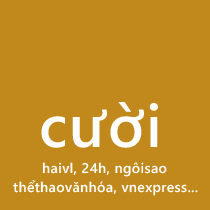
<style>
.page{position:relative;width:210px;height:210px;background:#c1891b}
.page>*{position:absolute;margin:0}
.t1{font:60px "SegoeWP-Semibold";letter-spacing:0.025em;color:#ffffff}
.t2{font:14px "SegoeWP-Semibold";letter-spacing:0.025em;color:#fefefe}
.t3{font:14px "SegoeWP-Semibold";letter-spacing:0.025em;color:#ffffff}
</style>
<div class="page">
<p class="t1" style="left:41px;top:102px;width:117px;height:46px">cười</p>
<p class="t2" style="left:42px;top:162px;width:125px;height:15px">haivl, 24h, ngôisao</p>
<p class="t3" style="left:13px;top:180px;width:185px;height:16px">thểthaovănhóa, vnexpress...</p>
</div>
